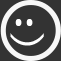
<style>
.page{position:relative;width:61px;height:61px;background:#333333}
.page>*{position:absolute;margin:0}
.t1{font:125px "Brie-Light";letter-spacing:0.025em;color:#f7f7f7}
.t2{font:72px "OpenSans-Light";letter-spacing:0.025em;color:#ffffff}
.t3{font:38.3px "OpenSans-Light";letter-spacing:0.025em;color:#ffffff;scale:1.61 1}
</style>
<div class="page">
<p class="t1" style="left:0px;top:0px;width:61px;height:61px">o</p>
<p class="t2" style="left:15px;top:19px;width:7px;height:7px">.</p>
<p class="t2" style="left:26px;top:19px;width:7px;height:7px">.</p>
<p class="t3" style="left:10px;top:33px;width:34px;height:13px;rotate:-90deg">(</p>
</div>
